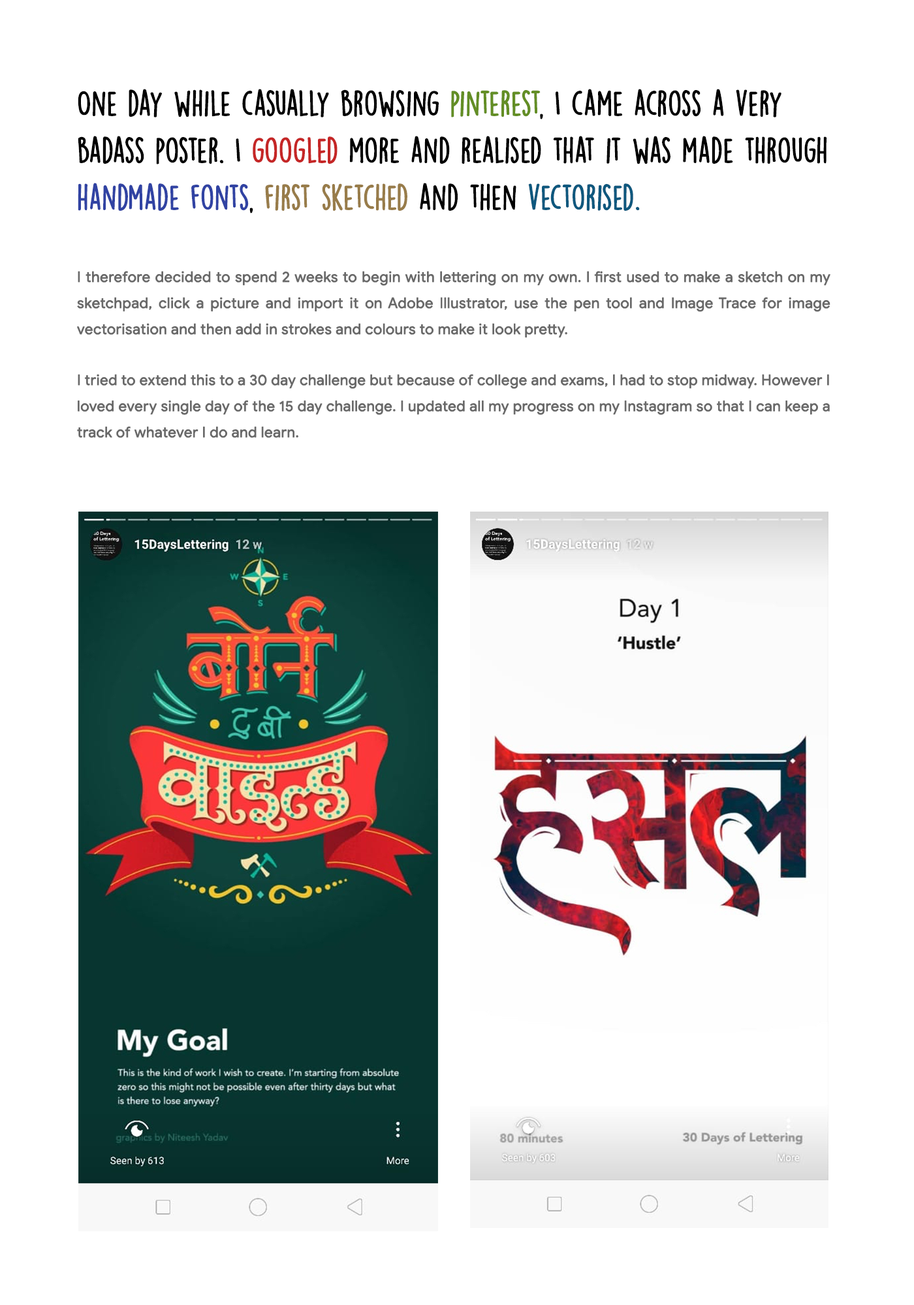
<style>
.page{position:relative;width:914px;height:1305px;background:#ffffff}
.page>*{position:absolute;margin:0}
.t1{font:31.3px/47px "DKLemonYellowSun";letter-spacing:-0.01em;color:#000000;font-weight:bold}
.t2{font:31.3px/47px "DKLemonYellowSun";letter-spacing:-0.01em;color:#638e25;font-weight:bold}
.t3{font:31.3px/47px "DKLemonYellowSun";letter-spacing:-0.01em;color:#c52626;font-weight:bold}
.t4{font:31.3px/47px "DKLemonYellowSun";letter-spacing:-0.01em;color:#3143a3;font-weight:bold}
.t5{font:31.3px/47px "DKLemonYellowSun";letter-spacing:-0.01em;color:#987c4a;font-weight:bold}
.t6{font:31.3px/47px "DKLemonYellowSun";letter-spacing:-0.01em;color:#0e587e;font-weight:bold}
.t7{font:14.5px/26.1px "GoogleSans-Regular";color:#696969;font-weight:bold}
</style>
<div class="page">
<p class="t1" style="left:78px;top:89px;width:749px;height:124px">One day while casually browsing<span class="t2"> pinterest</span>, I came across a very<br>badass poster. I <span class="t3">googled</span> more and realised that it was made through<br><span class="t4">handmade fonts</span>, <span class="t5">first sketched</span> and then <span class="t6">vectorised.</span></p>
<p class="t7" style="left:77px;top:271px;width:753px;height:67px;text-align:justify">I therefore decided to spend 2 weeks to begin with lettering on my own. I first used to make a sketch on my sketchpad, click a picture and import it on Adobe Illustrator, use the pen tool and Image Trace for image vectorisation and then add in strokes and colours to make it look pretty.</p>
<p class="t7" style="left:77px;top:374px;width:752px;height:64px;text-align:justify">I tried to extend this to a 30 day challenge but because of college and exams, I had to stop midway. However I loved every single day of the 15 day challenge. I updated all my progress on my Instagram so that I can keep a track of whatever I do and learn.</p>
</div>
